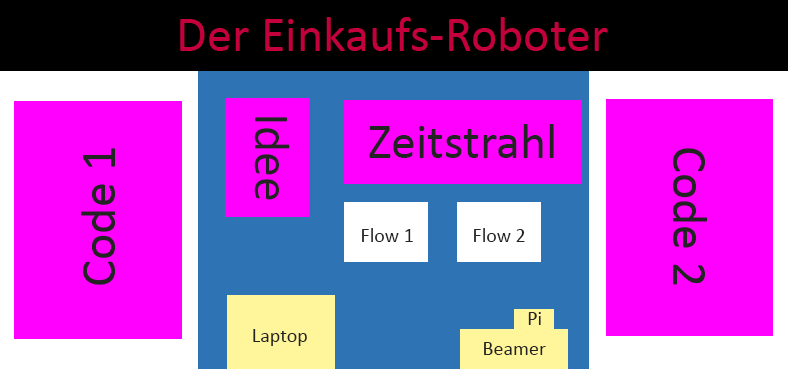
<style>
.page{position:relative;width:788px;height:369px;background:#ff00ff}
.page>*{position:absolute;margin:0}
.t1{font:50px "Calibri";color:#232323}
.t2{font:20px "Calibri";color:#232323}
</style>
<div class="page">
<p class="t1" style="left:254px;top:117px;width:36px;height:83px;rotate:90deg">Idee</p>
<p class="t1" style="left:369px;top:124px;width:185px;height:34px">Zeitstrahl</p>
<p class="t2" style="left:362px;top:228px;width:51px;height:14px">Flow 1</p>
<p class="t2" style="left:474px;top:228px;width:51px;height:14px">Flow 2</p>
<p class="t2" style="left:528px;top:312px;width:13px;height:13px">Pi</p>
<p class="t2" style="left:253px;top:329px;width:54px;height:17px">Laptop</p>
<p class="t2" style="left:484px;top:342px;width:62px;height:13px">Beamer</p>
</div>
